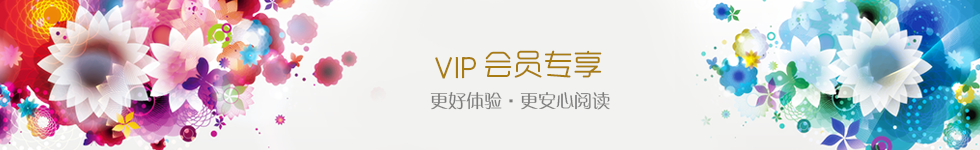
<style>
.page{position:relative;width:980px;height:150px;background:#f2f2f0}
.page>*{position:absolute;margin:0}
.t1{font:30px "RTWSYueRoudGoDemo-Regular";color:#a87c12}
.t2{font:30px "RTWSYueGoTrial-Regular";color:#a87c12}
.t3{font:18px "FZZQJW--GB1-0";color:#7d7c7c}
</style>
<div class="page">
<p class="t1" style="left:485px;top:50px;width:117px;height:28px">会员专享</p>
<p class="t2" style="left:435px;top:57px;width:41px;height:22px">VIP</p>
<p class="t3" style="left:430px;top:92px;width:180px;height:18px">更好体验·更安心阅读</p>
</div>
